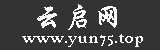
<style>
.page{position:relative;width:160px;height:50px;background:#333333}
.page>*{position:absolute;margin:0}
.t1{font:30px "STXingkai";color:#ffffff}
.t2{font:18px "HighTowerText-Reg";color:#ffffff}
</style>
<div class="page">
<p class="t1" style="left:37px;top:4px;width:80px;height:26px">云启网</p>
<p class="t2" style="left:22px;top:34px;width:121px;height:13px">www.yun75.top</p>
</div>
